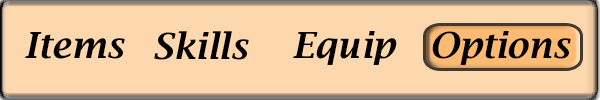
<style>
.page{position:relative;width:600px;height:100px;background:#fdd7ae}
.page>*{position:absolute;margin:0}
.t1{font:36px "LucidaBright-DemiItalic";color:#000000}
</style>
<div class="page">
<p class="t1" style="left:25px;top:32px;width:100px;height:27px">Items</p>
<p class="t1" style="left:154px;top:31px;width:95px;height:29px">Skills</p>
<p class="t1" style="left:293px;top:31px;width:104px;height:34px">Equip</p>
<p class="t1" style="left:432px;top:31px;width:139px;height:34px">Optionss</p>
</div>
